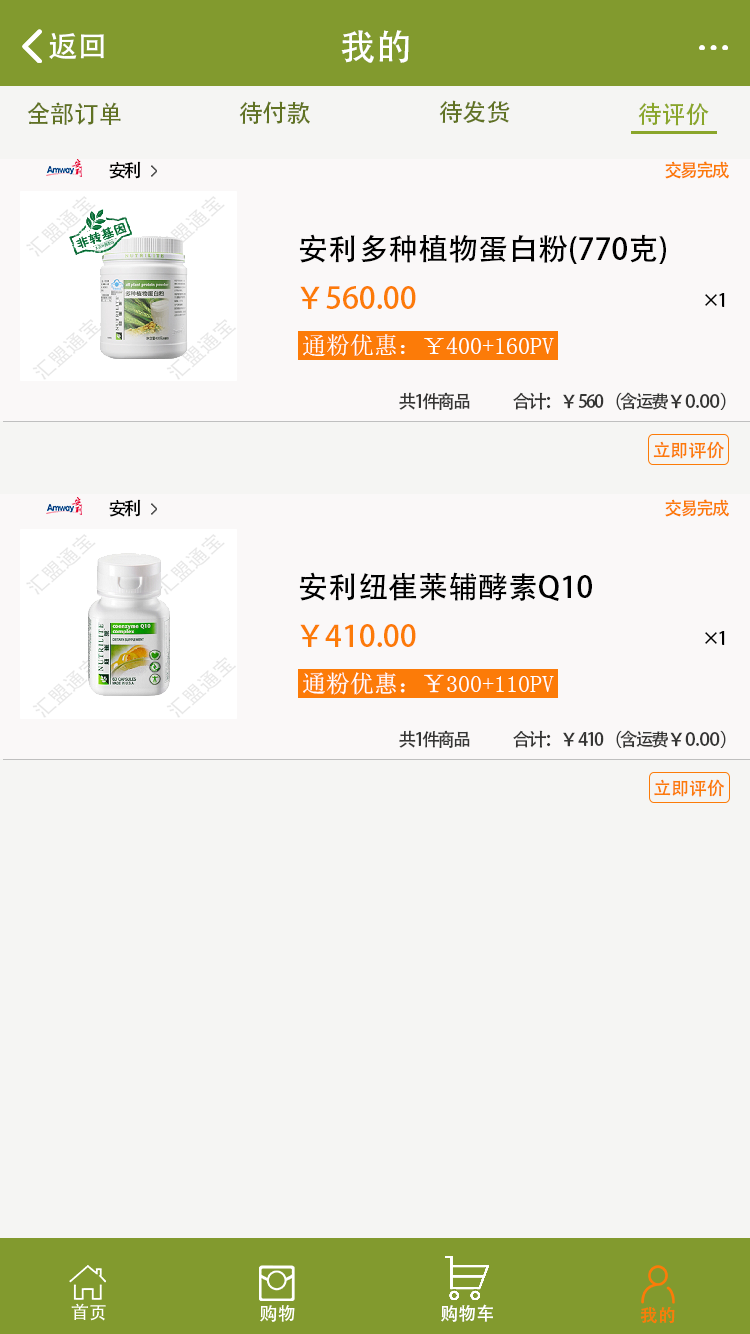
<style>
.page{position:relative;width:750px;height:1334px;background:#f5f5f3}
.page>*{position:absolute;margin:0}
.t1{font:36px "AdobeHeitiStd-Regular";color:#ffffff}
.t2{font:30px "AdobeHeitiStd-Regular";color:#ffffff}
.t3{font:24px "AdobeHeitiStd-Regular";color:#607222}
.t4{font:24px "AdobeHeitiStd-Regular";color:#8aa62a}
.t5{font:18px "AdobeHeitiStd-Regular";letter-spacing:-0.12em;color:#000000}
.t6{font:18px "AdobeHeitiStd-Regular";letter-spacing:-0.12em;color:#fc7b08}
.t7{font:30px "AdobeHeitiStd-Regular";color:#000000}
.t8{font:30px "AdobeHeitiStd-Regular";color:#fc7b08}
.t9{font:24px "AdobeHeitiStd-Regular";color:#ffffff}
.t10{font:18px "AdobeHeitiStd-Regular";letter-spacing:-0.12em;color:#353534}
.t11{font:18px "AdobeHeitiStd-Regular";color:#353534}
.t12{font:18px "AdobeHeitiStd-Regular";color:#fc7b08}
.t13{font:18px "AdobeHeitiStd-Regular";color:#ffffff}
</style>
<div class="page">
<p class="t1" style="left:341px;top:30px;width:68px;height:33px">我的</p>
<p class="t2" style="left:49px;top:33px;width:55px;height:26px">返回</p>
<p class="t3" style="left:27px;top:102px;width:94px;height:23px">全部订单</p>
<p class="t3" style="left:239px;top:101px;width:71px;height:23px">待付款</p>
<p class="t3" style="left:439px;top:100px;width:71px;height:23px">待发货</p>
<p class="t4" style="left:638px;top:102px;width:71px;height:24px">待评价</p>
<p class="t5" style="left:109px;top:161px;width:32px;height:18px">安利</p>
<p class="t6" style="left:665px;top:161px;width:64px;height:18px">交易完成</p>
<p class="t7" style="left:299px;top:234px;width:367px;height:30px">安利多种植物蛋白粉(770克)</p>
<p class="t8" style="left:300px;top:286px;width:116px;height:23px">￥560.00</p>
<p class="t5" style="left:705px;top:293px;width:20px;height:14px">×1</p>
<p class="t9" style="left:303px;top:334px;width:251px;height:22px">通粉优惠：￥400+160PV</p>
<p class="t10" style="left:399px;top:392px;width:327px;height:18px">共1件商品                       合计：<span class="t11">￥</span>560 （含运费<span class="t11">￥0.00）</span></p>
<p class="t12" style="left:653px;top:441px;width:71px;height:18px">立即评价</p>
<p class="t5" style="left:109px;top:499px;width:32px;height:18px">安利</p>
<p class="t6" style="left:665px;top:499px;width:64px;height:18px">交易完成</p>
<p class="t7" style="left:299px;top:572px;width:293px;height:29px">安利纽崔莱辅酵素Q10</p>
<p class="t8" style="left:300px;top:624px;width:116px;height:23px">￥410.00</p>
<p class="t5" style="left:705px;top:631px;width:20px;height:14px">×1</p>
<p class="t9" style="left:303px;top:672px;width:251px;height:23px">通粉优惠：￥300+110PV</p>
<p class="t10" style="left:399px;top:730px;width:327px;height:18px">共1件商品                       合计：<span class="t11">￥</span>410 （含运费<span class="t11">￥0.00）</span></p>
<p class="t12" style="left:654px;top:779px;width:71px;height:18px">立即评价</p>
<p class="t13" style="left:441px;top:1304px;width:52px;height:18px">购物车</p>
<p class="t12" style="left:640px;top:1306px;width:35px;height:18px">我的</p>
</div>
